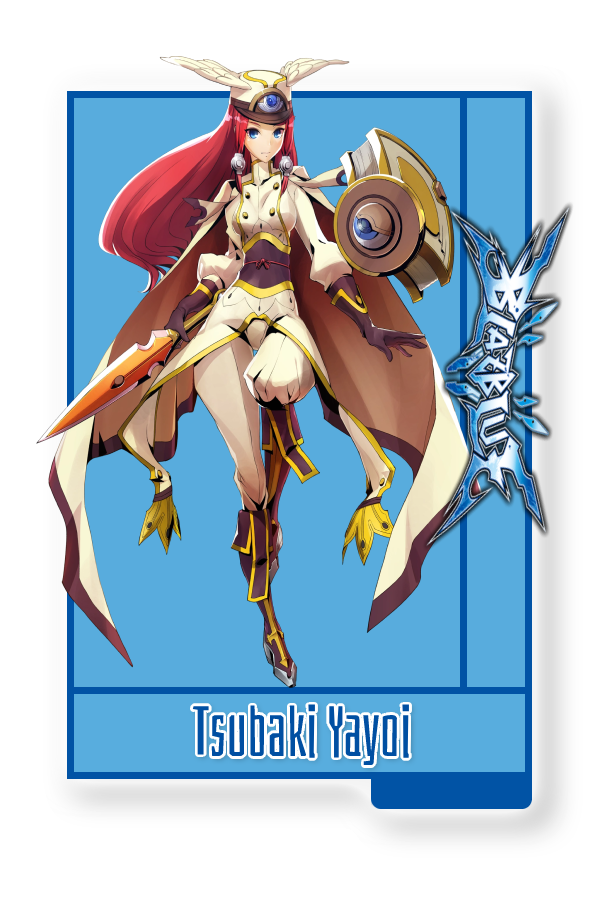
<style>
.page{position:relative;width:600px;height:900px;background:#ffffff}
.page>*{position:absolute;margin:0}
.t1{font:70px "Bahianita-Regular";color:#004fa2}
</style>
<div class="page">
<p class="t1" style="left:192px;top:704px;width:217px;height:62px">Tsubaki Yayoi</p>
</div>
